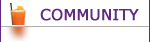
<style>
.page{position:relative;width:150px;height:42px;background:#ffffff}
.page>*{position:absolute;margin:0}
.t1{font:15px "Verdana";color:#612b83;font-weight:bold}
</style>
<div class="page">
<p class="t1" style="left:40px;top:8px;width:99px;height:13px">COMMUNITY</p>
</div>
